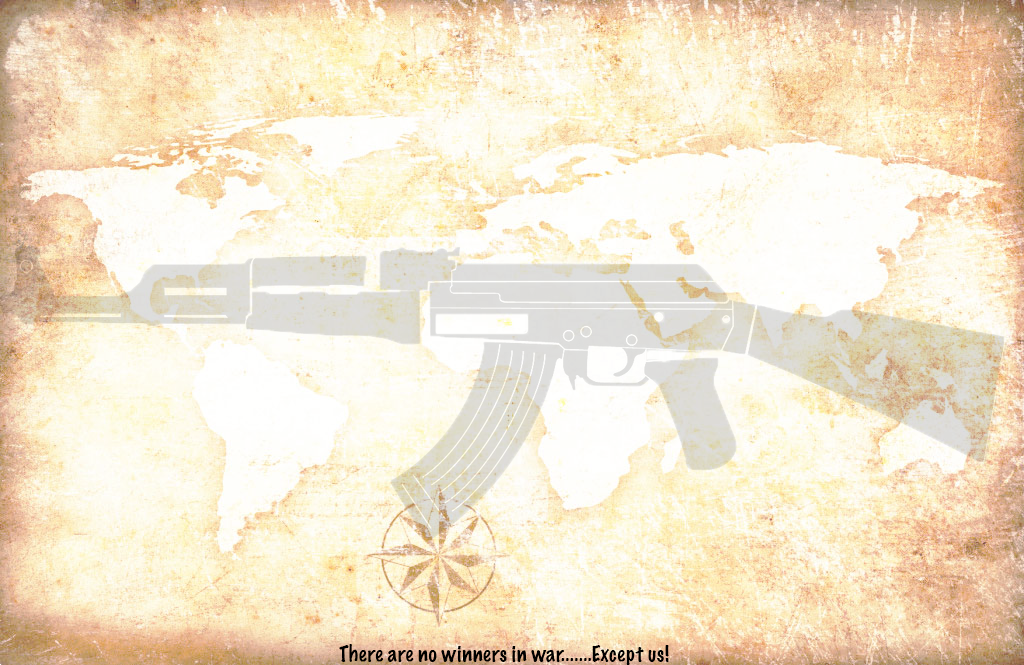
<style>
.page{position:relative;width:1024px;height:665px}
.page>*{position:absolute;margin:0}
.t1{font:20px "MarkerFelt-Thin";color:#000000}
</style>
<div class="page">
<p class="t1" style="left:339px;top:644px;width:330px;height:21px">There are no winners in war.......Except us!</p>
</div>
